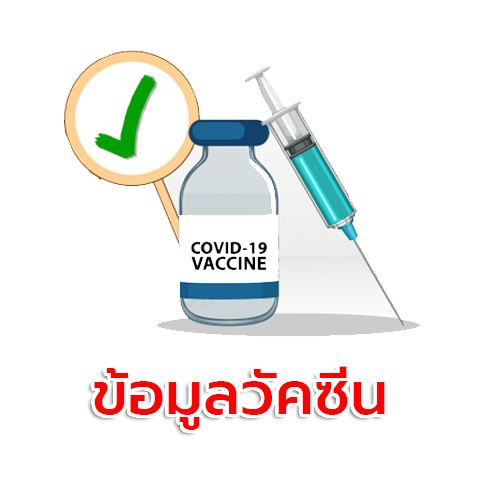
<style>
.page{position:relative;width:480px;height:480px;background:#ffffff}
.page>*{position:absolute;margin:0}
.t1{font:60px "Prompt-Medium";color:#ff0000}
</style>
<div class="page">
<p class="t1" style="left:94px;top:366px;width:291px;height:64px">ข้อมูลวัคซีน</p>
</div>
